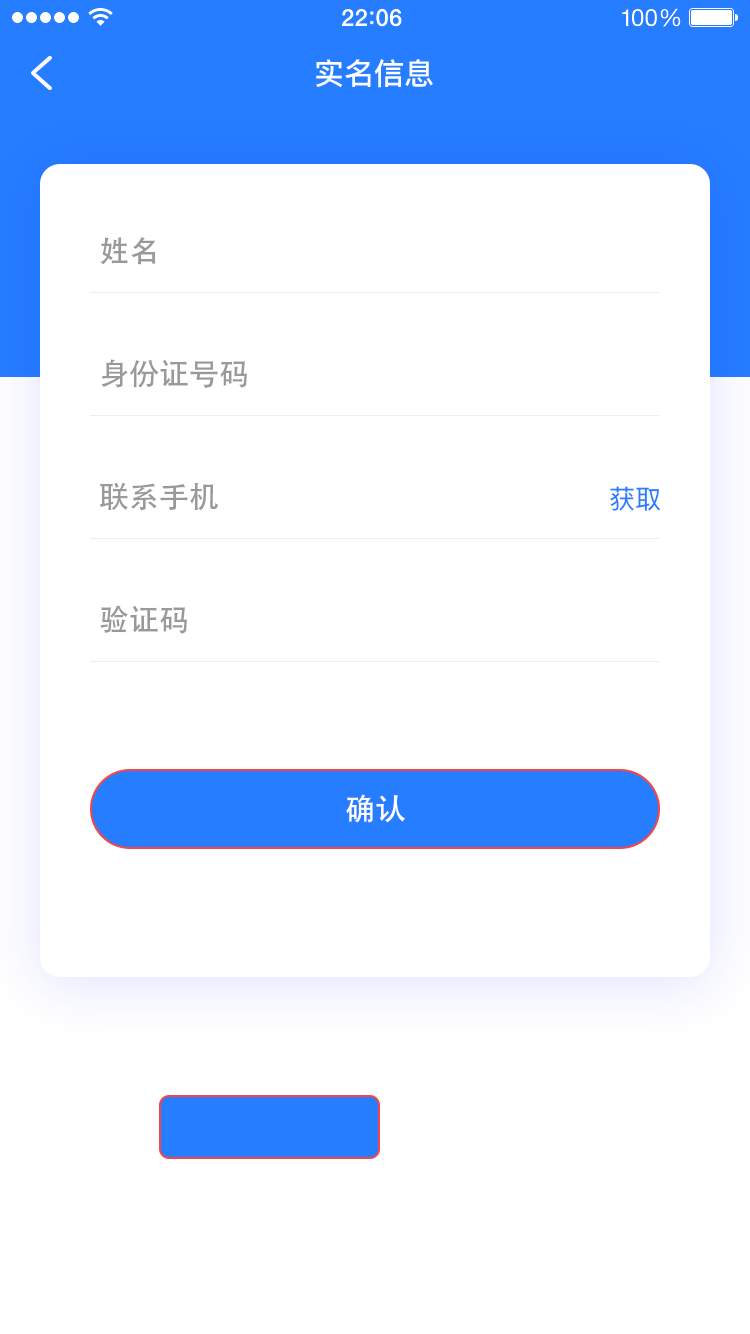
<style>
.page{position:relative;width:750px;height:1334px;background:#ffffff}
.page>*{position:absolute;margin:0}
.t1{font:30px "PingFangSC-Medium";color:#ffffff}
.t2{font:30px "AdobeHeitiStd-Regular";color:#999999}
.t3{font:26px "PingFangSC-Regular";color:#267dff}
.t4{font:30px "AdobeHeitiStd-Regular";color:#ffffff}
</style>
<div class="page">
<p class="t1" style="left:316px;top:59px;width:117px;height:29px">实名信息</p>
<p class="t2" style="left:100px;top:237px;width:56px;height:28px">姓名</p>
<p class="t2" style="left:101px;top:359px;width:146px;height:29px">身份证号码</p>
<p class="t2" style="left:100px;top:482px;width:118px;height:29px">联系手机</p>
<p class="t3" style="left:610px;top:486px;width:50px;height:25px">获取</p>
<p class="t2" style="left:100px;top:605px;width:87px;height:29px">验证码</p>
<p class="t4" style="left:346px;top:794px;width:59px;height:29px">确认</p>
</div>
